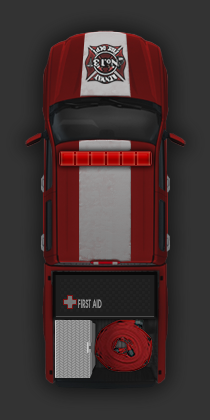
<style>
.page{position:relative;width:210px;height:420px;background:#333333}
.page>*{position:absolute;margin:0}
.t1{font:12.4px "AvantGardeITCTTDemi";color:#9a9a9a;scale:0.5 1}
</style>
<div class="page">
<p class="t1" style="left:78px;top:299px;width:24px;height:9px">FIRST AID</p>
</div>
